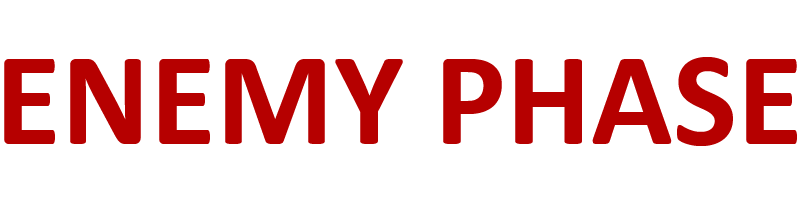
<style>
.page{position:relative;width:800px;height:200px;background:#ffffff}
.page>*{position:absolute;margin:0}
.t1{font:135px "Calibri-Bold";color:#b60000}
</style>
<div class="page">
<p class="t1" style="left:4px;top:57px;width:793px;height:89px">ENEMY PHASE</p>
</div>
